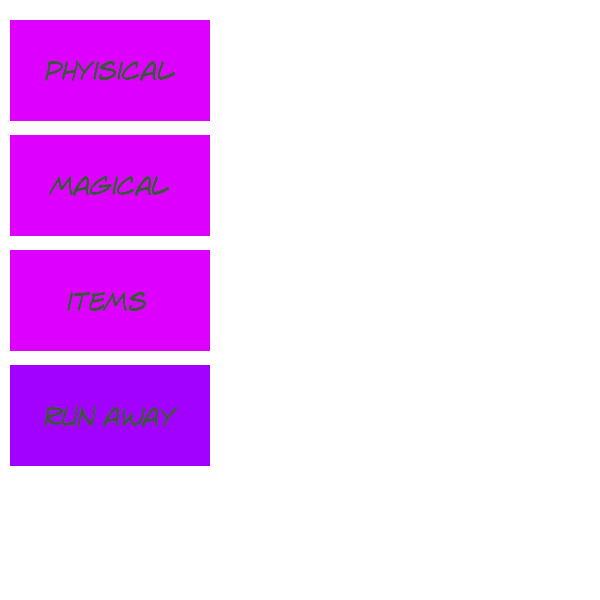
<style>
.page{position:relative;width:600px;height:600px;background:#ffffff}
.page>*{position:absolute;margin:0}
.t1{font:27.3px "LintMcCreeIntlBB-Italic";letter-spacing:-0.05em;color:#434f45}
</style>
<div class="page">
<p class="t1" style="left:45px;top:60px;width:131px;height:21px">Phyisical</p>
<p class="t1" style="left:49px;top:175px;width:121px;height:21px">magical</p>
<p class="t1" style="left:67px;top:291px;width:80px;height:21px">items</p>
<p class="t1" style="left:43px;top:406px;width:135px;height:21px">Run away</p>
</div>
